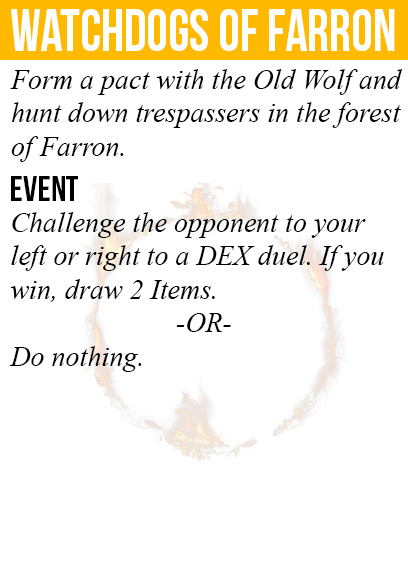
<style>
.page{position:relative;width:408px;height:585px;background:#ffffff}
.page>*{position:absolute;margin:0}
.t1{font:60px "BebasNeue";color:#ffffff;scale:0.91 1}
.t2{font:28px "TimesNewRomanPS-ItalicMT";color:#000000}
.t3{font:36px "BebasNeue";color:#000000}
</style>
<div class="page">
<p class="t1" style="left:11px;top:9px;width:384px;height:42px">watchdogs of farron</p>
<p class="t2" style="left:10px;top:69px;width:392px;height:93px">Form a pact with the Old Wolf and<br>hunt down trespassers in the forest<br>of Farron.</p>
<p class="t3" style="left:11px;top:176px;width:67px;height:25px">event</p>
<p class="t2" style="left:9px;top:212px;width:375px;height:160px">Challenge the opponent to your<br>left or right to a DEX duel. If you<br>win, draw 2 Items.<br><br>Do nothing.</p>
<p class="t2" style="left:176px;top:313px;width:55px;height:19px">-OR-</p>
</div>
